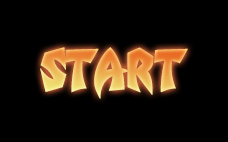
<style>
.page{position:relative;width:228px;height:142px;background:#000000}
.page>*{position:absolute;margin:0}
.t1{font:60px "MortalKombat5";letter-spacing:-0.04em;text-transform:uppercase;font-weight:bold}
</style>
<div class="page">
<p class="t1" style="left:40px;top:47px;width:148px;height:52px">Start</p>
</div>
